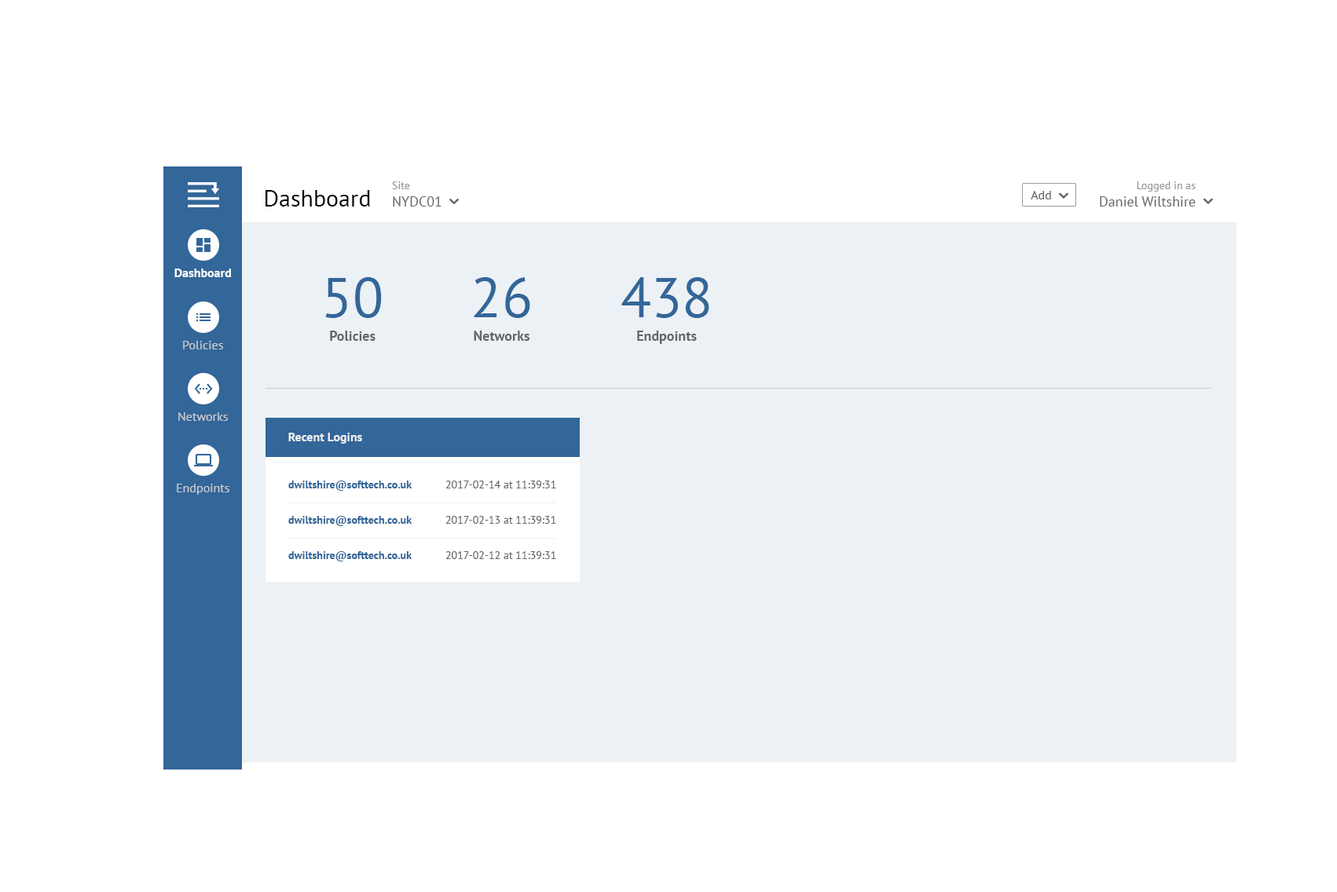
<style>
.page{position:relative;width:1337px;height:892px;background:#ffffff}
.page>*{position:absolute;margin:0}
.t1{font:14.1px "PTSans-Regular";color:#666666}
.t2{font:11px "PTSans-Regular";color:#999999}
.t3{font:14.3px "PTSans-Regular";color:#666666}
.t4{font:11.1px "PTSans-Regular";color:#999999}
.t5{font:23.6px "PTSans-Regular";color:#000000}
.t6{font:12.6px "PTSans-Regular";color:#666666}
.t7{font:12.6px "PTSans-Bold";color:#ffffff}
.t8{font:14.1px/23.6px "PTSans-Bold";color:#666666}
.t9{font:56.5px/23.6px "PTSans-Regular";color:#336699}
.t10{font:12.6px "PTSans-Regular";color:#cccccc}
.t11{font:12.6px "PTSans-Bold";color:#efefef}
.t12{font:11px "PTSans-Bold";color:#336699}
.t13{font:11px "PTSans-Regular";color:#666666}
</style>
<div class="page">
<p class="t1" style="left:392px;top:181px;width:49px;height:26px"><span class="t2">Site<br></span>NYDC01</p>
<p class="t3" style="left:1099px;top:181px;width:96px;height:26px;text-align:right"><span class="t4">Logged in as<br></span>Daniel Wiltshire</p>
<p class="t5" style="left:265px;top:190px;width:105px;height:17px">Dashboard</p>
<p class="t6" style="left:1030px;top:191px;width:21px;height:8px">Add</p>
<p class="t7" style="left:174px;top:269px;width:58px;height:8px">Dashboard</p>
<p class="t8" style="left:325px;top:277px;width:57px;height:64px;text-align:center"><span class="t9">50<br></span>Policies</p>
<p class="t8" style="left:474px;top:277px;width:56px;height:64px;text-align:center"><span class="t9">26<br></span>Networks</p>
<p class="t8" style="left:621px;top:277px;width:88px;height:67px;text-align:center"><span class="t9">438<br></span>Endpoints</p>
<p class="t10" style="left:183px;top:341px;width:40px;height:8px">Policies</p>
<p class="t10" style="left:178px;top:412px;width:50px;height:9px">Networks</p>
<p class="t11" style="left:288px;top:433px;width:74px;height:11px">Recent Logins</p>
<p class="t10" style="left:177px;top:484px;width:52px;height:11px">Endpoints</p>
<p class="t12" style="left:288px;top:481px;width:124px;height:10px">dwiltshire@softtech.co.uk</p>
<p class="t13" style="left:445px;top:481px;width:111px;height:7px">2017-02-14 at 11:39:31</p>
<p class="t12" style="left:288px;top:516px;width:124px;height:10px">dwiltshire@softtech.co.uk</p>
<p class="t13" style="left:445px;top:516px;width:111px;height:8px">2017-02-13 at 11:39:31</p>
<p class="t12" style="left:288px;top:551px;width:124px;height:11px">dwiltshire@softtech.co.uk</p>
<p class="t13" style="left:445px;top:551px;width:111px;height:8px">2017-02-12 at 11:39:31</p>
</div>
